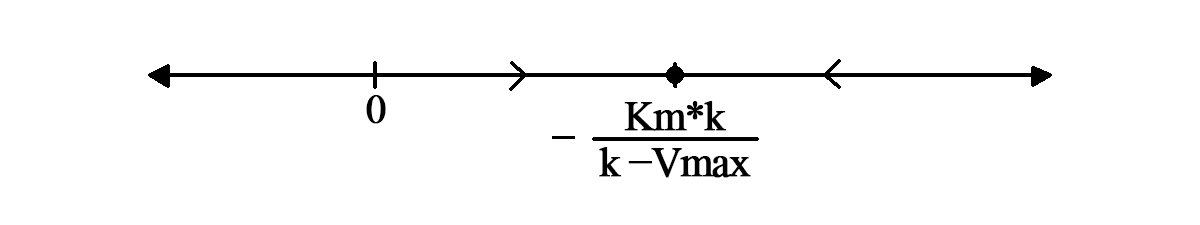
<style>
.page{position:relative;width:1200px;height:225px;background:#ffffff}
.page>*{position:absolute;margin:0}
.t1{font:41.7px "TimesNewRomanPSMT";letter-spacing:-0.05em;color:#000000;font-weight:bold}
.t2{font:41.7px/45.8px "TimesNewRomanPSMT";letter-spacing:-0.05em;color:#000000;font-weight:bold}
</style>
<div class="page">
<p class="t1" style="left:366px;top:95px;width:20px;height:29px">0</p>
<p class="t2" style="left:599px;top:101px;width:152px;height:77px;text-align:center">Km*k<br>k −Vmax</p>
</div>
